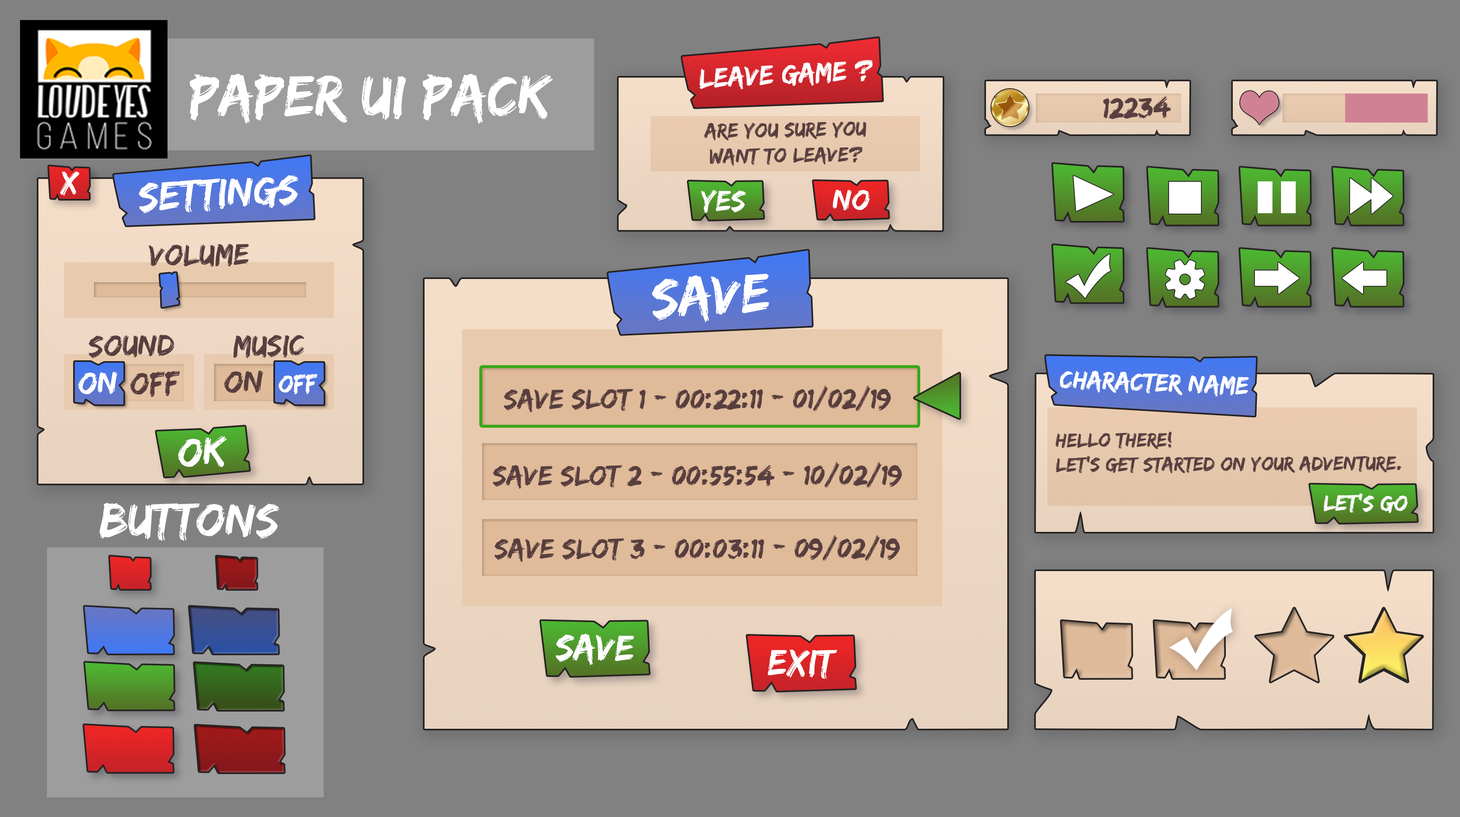
<style>
.page{position:relative;width:1460px;height:817px;background:#818181}
.page>*{position:absolute;margin:0}
.t1{font:28.5px "EdoSZ";color:#ffffff}
.t2{font:60.1px "EdoSZ";color:#ffffff}
.t3{font:29.5px "EdoSZ";color:#583e3e}
.t4{font:21.2px "EdoSZ";color:#583e3e}
.t5{font:32.4px "EdoSZ";color:#ffffff}
.t6{font:41.9px "EdoSZ";color:#ffffff}
.t7{font:30px "EdoSZ";color:#ffffff}
.t8{font:30.8px "EdoSZ";color:#583e3e}
.t9{font:56.9px "EdoSZ";color:#ffffff}
.t10{font:32.1px "EdoSZ";color:#ffffff}
.t11{font:32.1px "EdoSZ";color:#583e3e}
.t12{font:25.3px "EdoSZ";color:#ffffff}
.t13{font:26.1px "EdoSZ";color:#ffffff}
.t14{font:28.8px "EdoSZ";color:#583e3e}
.t15{font:20.4px "EdoSZ";color:#583e3e}
.t16{font:23px "EdoSZ";color:#ffffff}
.t17{font:48.4px "EdoSZ";color:#ffffff}
.t18{font:37.7px "EdoSZ";color:#ffffff}
</style>
<div class="page">
<p class="t1" style="left:699px;top:60px;width:174px;height:30px;rotate:-3deg">Leave Game ?</p>
<p class="t2" style="left:190px;top:74px;width:363px;height:50px">Paper UI Pack</p>
<p class="t3" style="left:1103px;top:96px;width:68px;height:23px;rotate:-1deg">12234</p>
<p class="t4" style="left:704px;top:121px;width:162px;height:45px;text-align:center;rotate:-1deg">Are You sure you<br>want to Leave?</p>
<p class="t5" style="left:60px;top:171px;width:20px;height:25px;rotate:-3deg">x</p>
<p class="t6" style="left:138px;top:175px;width:161px;height:39px;rotate:-3deg">Settings</p>
<p class="t7" style="left:701px;top:190px;width:45px;height:23px;rotate:1deg">Yes</p>
<p class="t7" style="left:833px;top:190px;width:37px;height:21px;rotate:1deg">No</p>
<p class="t8" style="left:148px;top:243px;width:101px;height:24px;rotate:-1deg">volume</p>
<p class="t9" style="left:652px;top:274px;width:117px;height:48px;rotate:-3deg">Save</p>
<p class="t8" style="left:89px;top:335px;width:85px;height:23px;rotate:-1deg">Sound</p>
<p class="t8" style="left:233px;top:335px;width:71px;height:23px;rotate:-1deg">Music</p>
<p class="t10" style="left:78px;top:372px;width:39px;height:22px;rotate:-3deg">On</p>
<p class="t11" style="left:130px;top:371px;width:50px;height:26px;rotate:-3deg">Off</p>
<p class="t11" style="left:224px;top:371px;width:39px;height:22px;rotate:-3deg">ON</p>
<p class="t12" style="left:278px;top:374px;width:39px;height:20px;rotate:-3deg">Off</p>
<p class="t13" style="left:1059px;top:371px;width:190px;height:26px;rotate:2deg">Character Name</p>
<p class="t14" style="left:504px;top:385px;width:387px;height:28px">Save Slot 1 - 00:22:11 - 01/02/19</p>
<p class="t6" style="left:178px;top:436px;width:49px;height:31px;rotate:-3deg">ok</p>
<p class="t15" style="left:1055px;top:431px;width:346px;height:42px">Hello There!<br>Let’s Get started on your adventure.</p>
<p class="t14" style="left:493px;top:462px;width:409px;height:27px">Save Slot 2 - 00:55:54 - 10/02/19</p>
<p class="t16" style="left:1323px;top:493px;width:84px;height:20px;rotate:1deg">Let’s Go</p>
<p class="t17" style="left:99px;top:503px;width:181px;height:38px">Buttons</p>
<p class="t14" style="left:494px;top:535px;width:406px;height:27px">Save Slot 3 - 00:03:11 - 09/02/19</p>
<p class="t18" style="left:556px;top:634px;width:78px;height:31px;rotate:1deg">Save</p>
<p class="t18" style="left:767px;top:649px;width:70px;height:30px;rotate:1deg">Exit</p>
</div>
